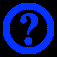
<style>
.page{position:relative;width:57px;height:57px;background:#000000}
.page>*{position:absolute;margin:0}
.t1{font:45px "TimesNewRomanPS-BoldMT";color:#0433ff}
</style>
<div class="page">
<p class="t1" style="left:20px;top:13px;width:18px;height:32px">?</p>
</div>
